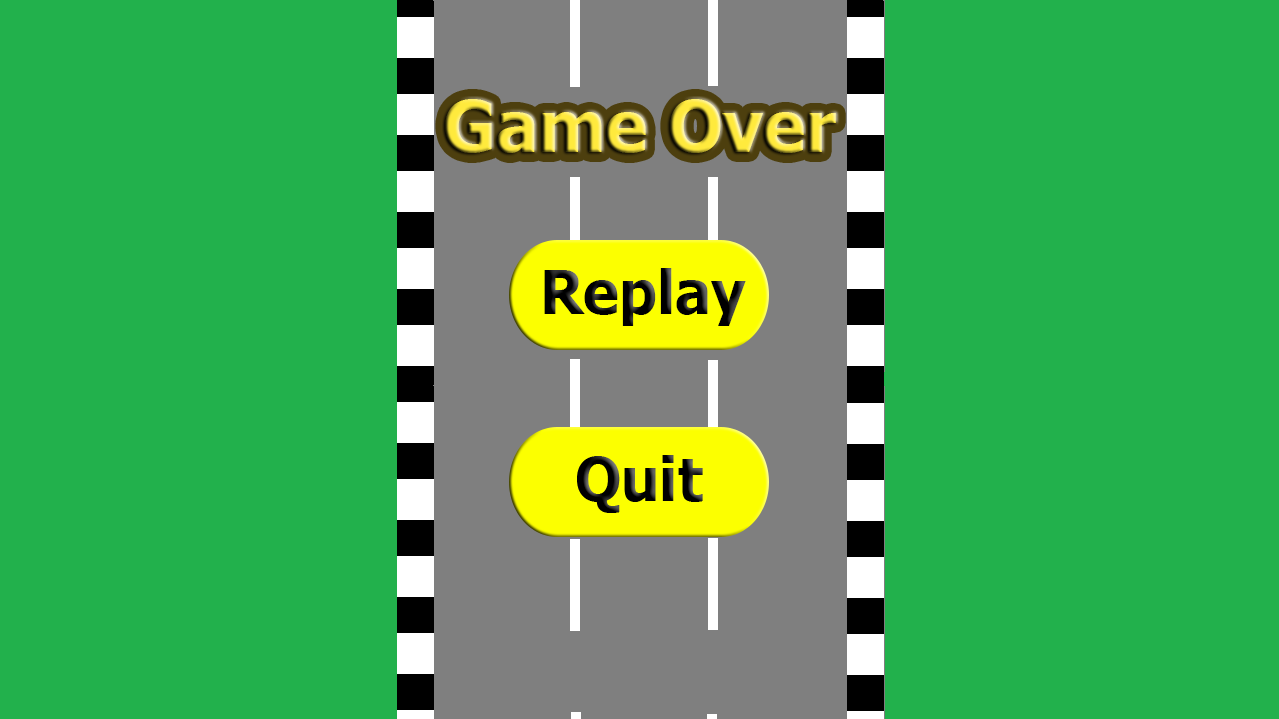
<style>
.page{position:relative;width:1279px;height:719px;background:#22b14c}
.page>*{position:absolute;margin:0}
.t1{font:70.7px "Tahoma-Bold"}
.t2{font:60px "Tahoma-Bold";color:#000000}
</style>
<div class="page">
<p class="t1" style="left:445px;top:99px;width:391px;height:54px">Game Over</p>
<p class="t2" style="left:544px;top:268px;width:202px;height:58px">Replay</p>
</div>
